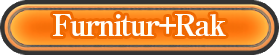
<style>
.page{position:relative;width:279px;height:55px}
.page>*{position:absolute;margin:0}
.t1{font:30px "RyuminPro-ExBold";letter-spacing:-0.08em;color:#fffff7}
</style>
<div class="page">
<p class="t1" style="left:53px;top:14px;width:173px;height:22px">Furnitur+Rak</p>
</div>
